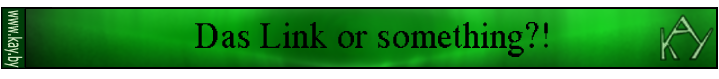
<style>
.page{position:relative;width:719px;height:79px;background:#ffffff}
.page>*{position:absolute;margin:0}
.t1{font:18.3px "Verdana";color:#cbe3bc;scale:0.52 1}
.t2{font:36px "MS Serif";color:#000000}
</style>
<div class="page">
<p class="t1" style="left:4px;top:10px;width:19px;height:58px;rotate:90deg">www.kay.by</p>
<p class="t2" style="left:195px;top:22px;width:353px;height:35px">Das Link or something?!</p>
</div>
